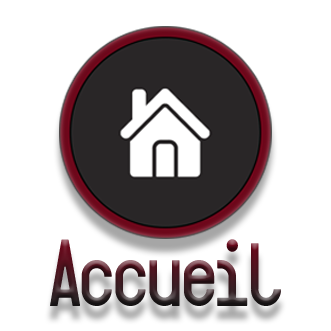
<style>
.page{position:relative;width:331px;height:331px;background:#ffffff}
.page>*{position:absolute;margin:0}
.t1{font:83.3px "Targa";scale:0.9 1}
</style>
<div class="page">
<p class="t1" style="left:50px;top:239px;width:231px;height:67px">Accueil</p>
</div>
